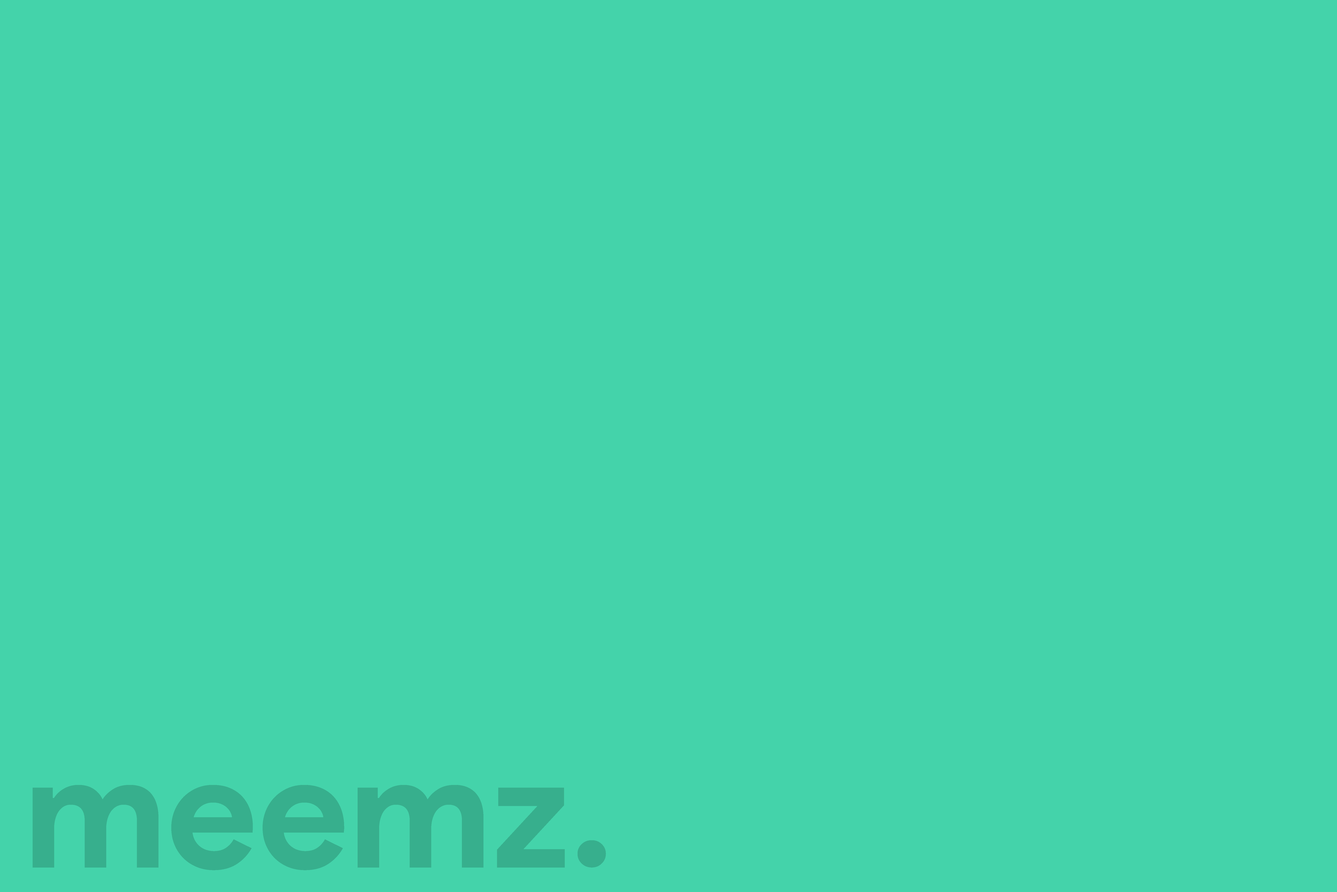
<style>
.page{position:relative;width:1337px;height:892px;background:#44d3aa}
.page>*{position:absolute;margin:0}
.t1{font:162.8px "ProductSans-Bold";color:#37af8d}
</style>
<div class="page">
<p class="t1" style="left:33px;top:785px;width:573px;height:85px">meemz.</p>
</div>
